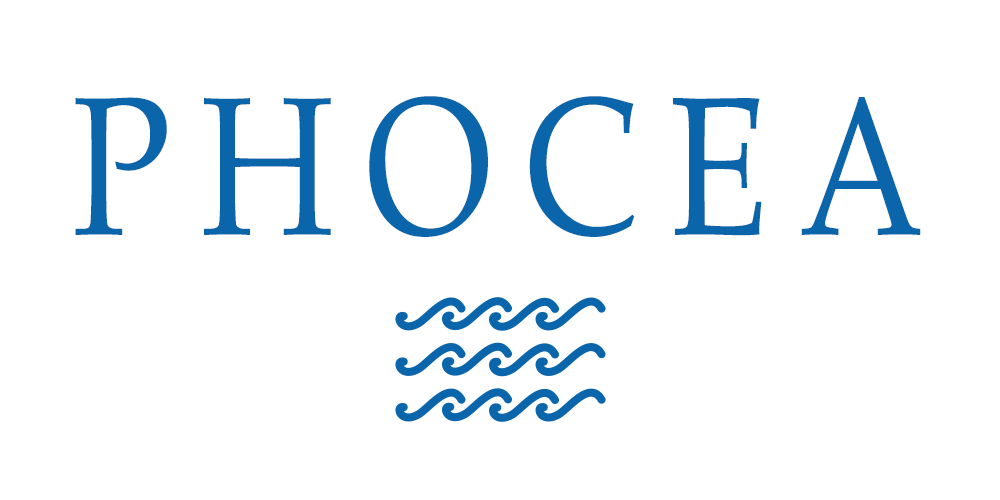
<style>
.page{position:relative;width:1000px;height:500px;background:#ffffff}
.page>*{position:absolute;margin:0}
.t1{font:196.8px "BookAntiqua";letter-spacing:0.2em;color:#0b65ab;scale:0.81 1}
.t2{font:196.8px "BookAntiqua";letter-spacing:0.32em;color:#0b65ab;scale:0.81 1}
</style>
<div class="page">
<p class="t1" style="left:75px;top:96px;width:846px;height:141px">PHOCEA<span class="t2">A</span></p>
</div>
